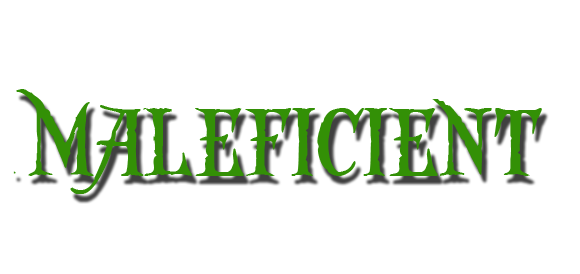
<style>
.page{position:relative;width:580px;height:274px;background:#ffffff}
.page>*{position:absolute;margin:0}
.t1{font:91.7px "CaptainKiddDemo";color:#339006}
</style>
<div class="page">
<p class="t1" style="left:13px;top:89px;width:529px;height:105px">Maleficient</p>
</div>
